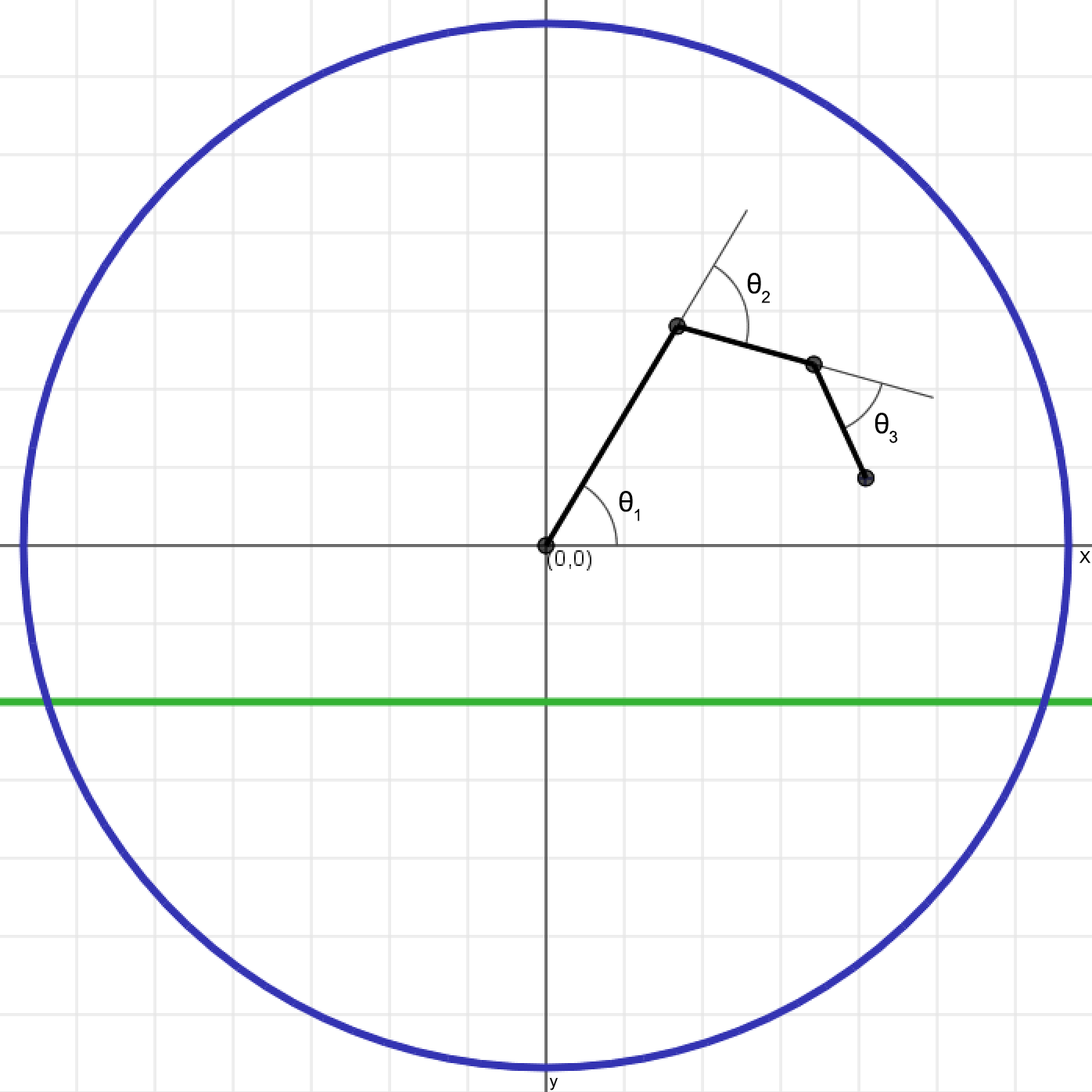
<style>
.page{position:relative;width:1092px;height:1092px;background:#ffffff}
.page>*{position:absolute;margin:0}
.t1{font:28.2px "ArialMT";letter-spacing:-0.025em;color:#000000}
</style>
<div class="page">
<p class="t1" style="left:747px;top:273px;width:22px;height:30px">θ2</p>
<p class="t1" style="left:874px;top:413px;width:24px;height:30px">θ3</p>
<p class="t1" style="left:619px;top:491px;width:21px;height:31px">θ1</p>
<p class="t1" style="left:1079px;top:551px;width:11px;height:13px">X</p>
<p class="t1" style="left:549px;top:1078px;width:9px;height:13px">y</p>
</div>
